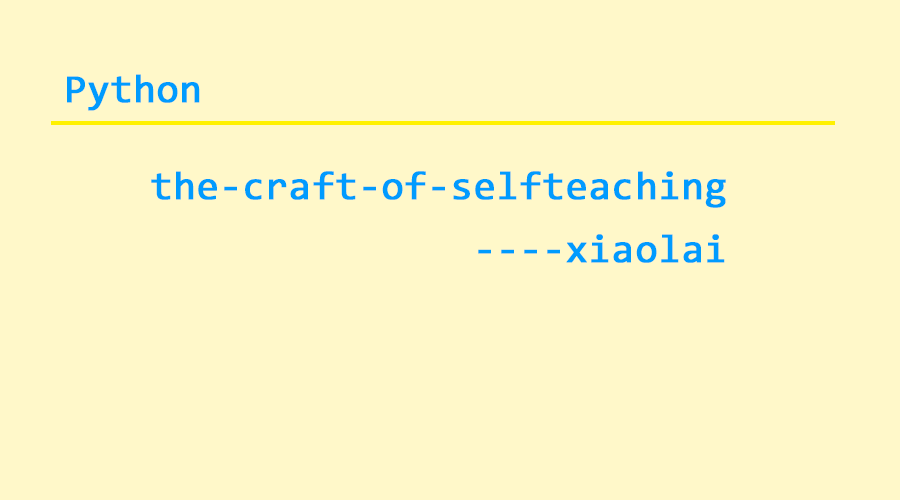
<style>
.page{position:relative;width:900px;height:500px;background:#fff8c9}
.page>*{position:absolute;margin:0}
.t1{font:40px "YaHei-Consolas-Hybrid";color:#009bfe;font-weight:bold}
</style>
<div class="page">
<p class="t1" style="left:67px;top:74px;width:133px;height:37px">Python</p>
<p class="t1" style="left:151px;top:171px;width:575px;height:37px">the-craft-of-selfteaching</p>
<p class="t1" style="left:478px;top:234px;width:247px;height:29px">----xiaolai</p>
</div>
